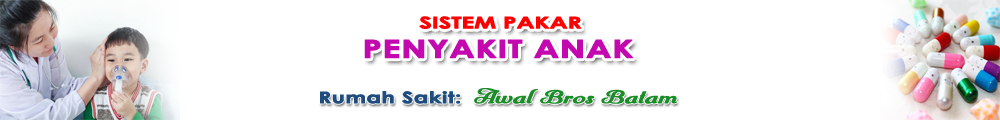
<style>
.page{position:relative;width:1000px;height:120px;background:#ffffff}
.page>*{position:absolute;margin:0}
.t1{font:16px "CenturyGothic-Bold";letter-spacing:-0.025em;color:#ff0000;font-weight:bold;scale:1.52 1}
.t2{font:25px "CenturyGothic-Bold";color:#c208ae;font-weight:bold;scale:1.36 1}
.t3{font:16px "Trumpit";color:#1a8c28;font-weight:bold;scale:1.36 1}
.t4{font:16px "CenturyGothic-Bold";color:#1f4c7e;font-weight:bold;scale:1.36 1}
</style>
<div class="page">
<p class="t1" style="left:419px;top:16px;width:163px;height:13px">SISTEM PAKAR</p>
<p class="t2" style="left:364px;top:39px;width:270px;height:20px">PENYAKIT ANAK</p>
<p class="t3" style="left:320px;top:88px;width:358px;height:16px"><span class="t4">Rumah Sakit:  </span>Awal Bros Batam</p>
</div>
